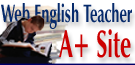
<style>
.page{position:relative;width:135px;height:65px}
.page>*{position:absolute;margin:0}
.t1{font:25.3px "ZapfHumanist601BT-Bold";color:#062a6b;scale:0.57 1}
.t2{font:37.9px "ZapfHumanist601BT-Bold";color:#cc0000;scale:0.57 1}
</style>
<div class="page">
<p class="t1" style="left:1px;top:3px;width:131px;height:26px">Web English Teacher</p>
<p class="t2" style="left:59px;top:29px;width:72px;height:29px">A+ Site</p>
</div>
